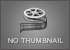
<style>
.page{position:relative;width:70px;height:50px}
.page>*{position:absolute;margin:0}
.t1{font:6.9px "ArialMT";letter-spacing:0.05em;color:#c3c3c3}
</style>
<div class="page">
<p class="t1" style="left:8px;top:38px;width:56px;height:5px">NO THUMBNAIL</p>
</div>
